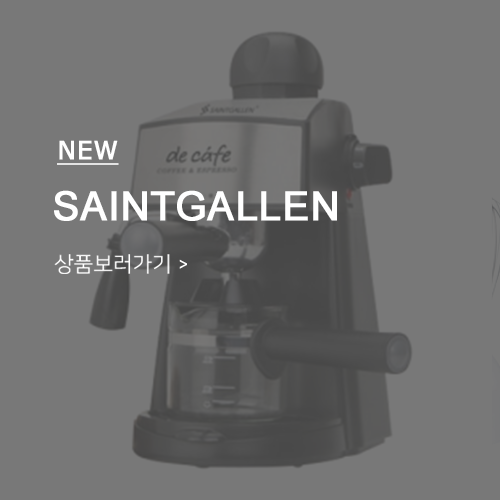
<style>
.page{position:relative;width:500px;height:500px;background:#787878}
.page>*{position:absolute;margin:0}
.t1{font:25px "Verdana";color:#ffffff;font-weight:bold;text-decoration:underline}
.t2{font:40px "ArialMT";color:#ffffff;text-transform:uppercase;font-weight:bold}
</style>
<div class="page">
<p class="t1" style="left:57px;top:140px;width:62px;height:25px">NEW</p>
<p class="t2" style="left:54px;top:190px;width:283px;height:31px">saintgallen</p>
</div>
